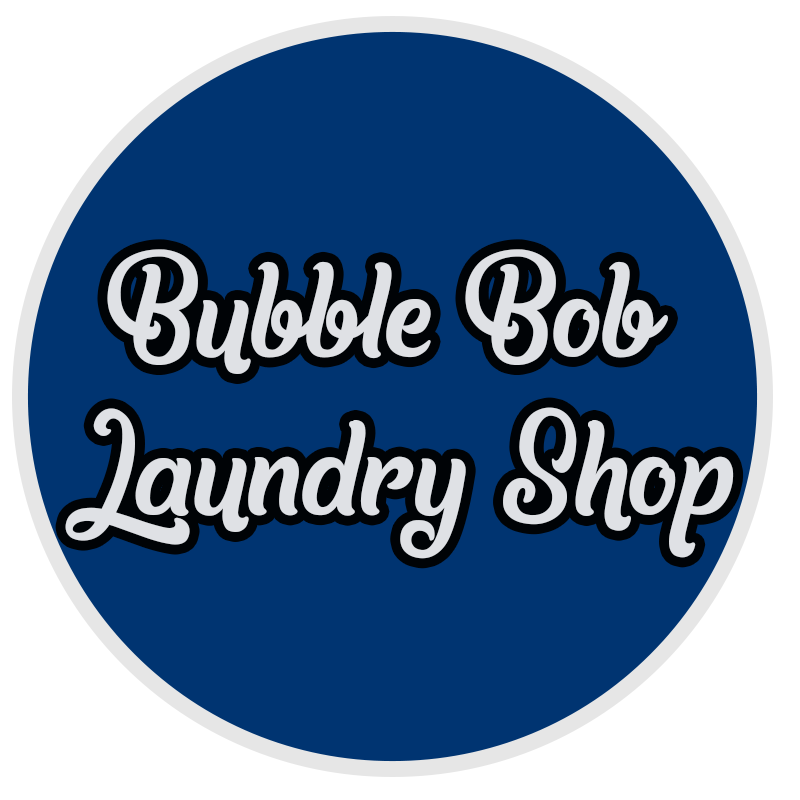
<style>
.page{position:relative;width:800px;height:800px;background:#003471}
.page>*{position:absolute;margin:0}
.t1{font:150px "Another-day-in-Paradise";color:#dfe1e5}
</style>
<div class="page">
<p class="t1" style="left:107px;top:249px;width:561px;height:125px">Bubble Bob</p>
<p class="t1" style="left:65px;top:407px;width:669px;height:152px">Laundry Shop</p>
</div>
